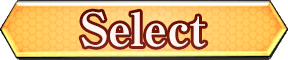
<style>
.page{position:relative;width:288px;height:60px}
.page>*{position:absolute;margin:0}
.t1{font:46px "RyuminPro-ExBold";color:#fff6f2}
</style>
<div class="page">
<p class="t1" style="left:81px;top:11px;width:125px;height:36px">Select</p>
</div>
